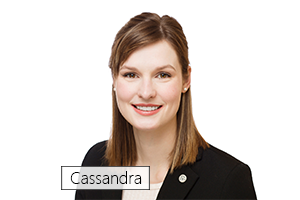
<style>
.page{position:relative;width:300px;height:200px;background:#ffffff}
.page>*{position:absolute;margin:0}
.t1{font:16.7px "SegoeUI-Light";color:#000000}
</style>
<div class="page">
<p class="t1" style="left:70px;top:171px;width:72px;height:13px">Cassandra</p>
</div>
